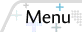
<style>
.page{position:relative;width:82px;height:32px;background:#ffffff}
.page>*{position:absolute;margin:0}
.t1{font:18.7px "Amira-Roman";color:#000000}
</style>
<div class="page">
<p class="t1" style="left:26px;top:10px;width:44px;height:14px;opacity:0.96">Menu</p>
</div>
